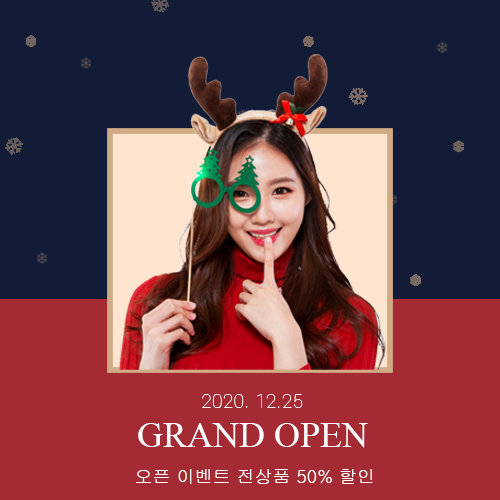
<style>
.page{position:relative;width:500px;height:500px;background:#121c37}
.page>*{position:absolute;margin:0}
.t1{font:18px "S-CoreDream-1Thin";color:#ffffff}
.t2{font:36px "TimesNewRomanPSMT";color:#ffffff}
.t3{font:18px "Gulim";color:#ffffff}
</style>
<div class="page">
<p class="t1" style="left:202px;top:394px;width:101px;height:14px">2020. 12.25</p>
<p class="t2" style="left:138px;top:423px;width:230px;height:25px">GRAND OPEN</p>
<p class="t3" style="left:136px;top:469px;width:237px;height:15px">오픈 이벤트 전상품 50% 할인</p>
</div>
